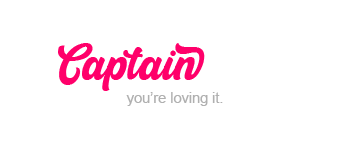
<style>
.page{position:relative;width:350px;height:150px;background:#ffffff}
.page>*{position:absolute;margin:0}
.t1{font:42.8px "RetrowMentho";color:#ff006a}
.t2{font:42.8px "RetrowMentho";color:#ffffff}
.t3{font:14.5px "ArialMT";color:#b0b0b0}
</style>
<div class="page">
<p class="t1" style="left:58px;top:43px;width:234px;height:48px">Captain <span class="t2">Fox</span></p>
<p class="t3" style="left:126px;top:92px;width:97px;height:14px">you’re loving it.</p>
</div>
